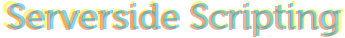
<style>
.page{position:relative;width:345px;height:38px;background:#ffffff}
.page>*{position:absolute;margin:0}
.t1{font:37px "Museo-500"}
.t2{font:36px "Museo-500"}
</style>
<div class="page">
<p class="t1" style="left:2px;top:1px;width:342px;height:34px">Serverside Scripting</p>
<p class="t2" style="left:6px;top:4px;width:332px;height:33px">Serverside Scripting</p>
<p class="t2" style="left:9px;top:3px;width:332px;height:33px">Serverside Scripting</p>
</div>
